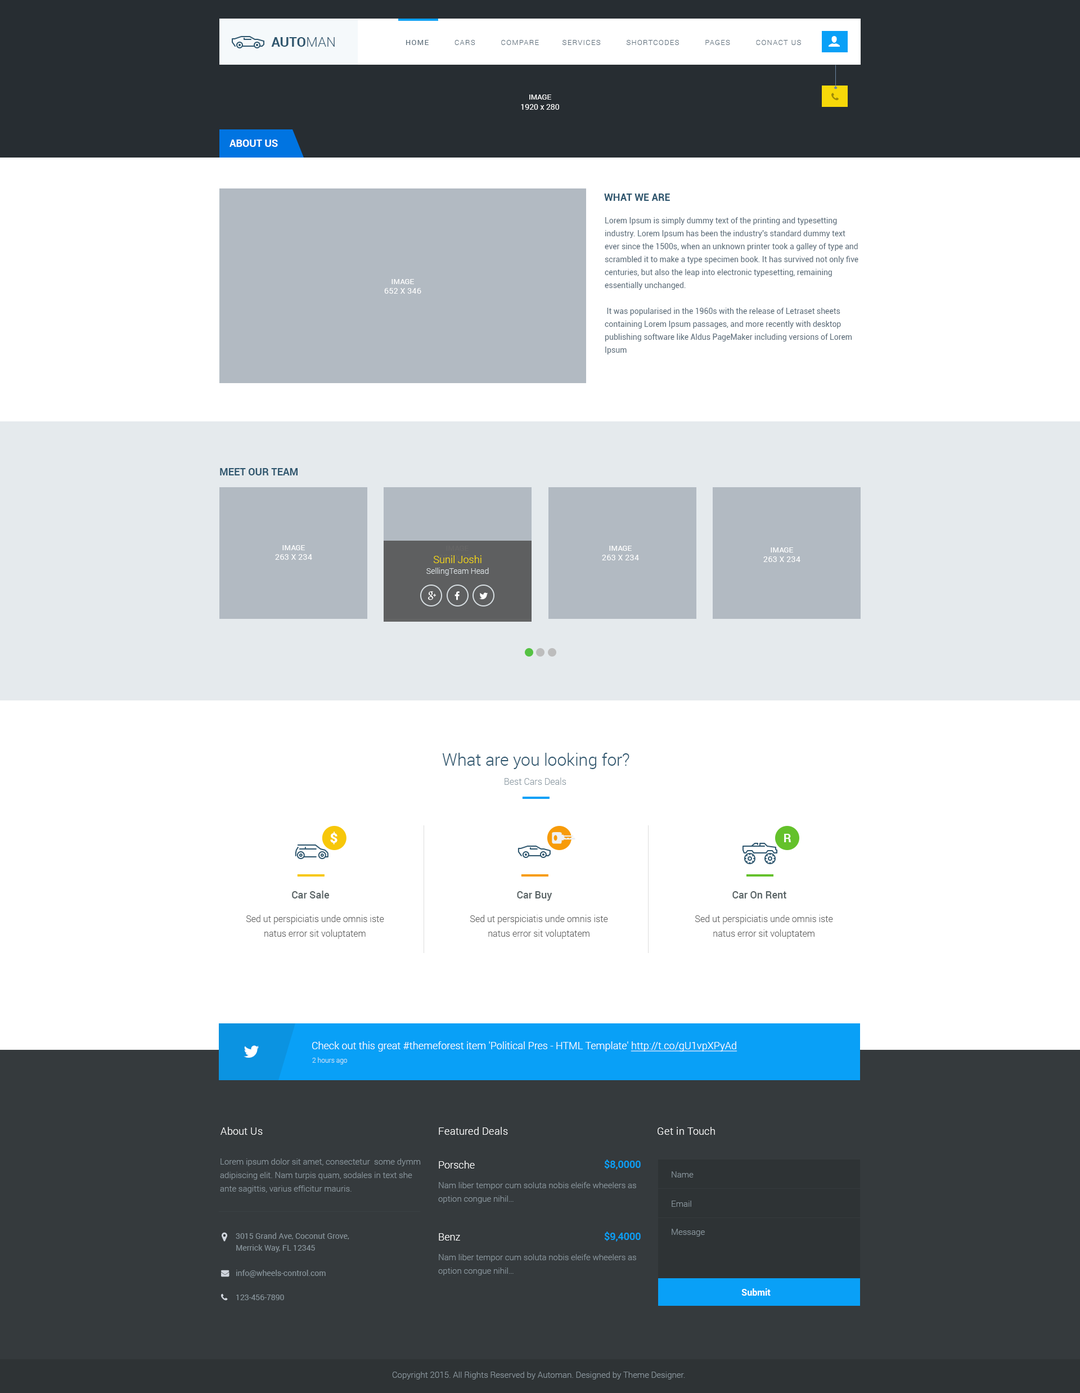
<style>
.page{position:relative;width:1080px;height:1393px;background:#ffffff}
.page>*{position:absolute;margin:0}
.t1{font:13.5px "Roboto-Bold";color:#2e566e;text-transform:uppercase}
.t2{font:13.5px "Roboto-Light";color:#2e566e;text-transform:uppercase}
.t3{font:7.3px "Roboto-Light";letter-spacing:0.1em;color:#5d6e7b;text-transform:uppercase}
.t4{font:7.3px "Roboto-Regular";letter-spacing:0.1em;color:#5d6e7b;text-transform:uppercase}
.t5{font:7.9px/10.1px "Roboto-Regular";color:#ffffff}
.t6{font:7.3px/10.1px "Roboto-Regular";color:#ffffff}
.t7{font:10.1px "Roboto-Bold";color:#ffffff;text-transform:uppercase}
.t8{font:10.1px "Roboto-Bold";color:#2e566e;text-transform:uppercase}
.t9{font:7.9px/12.9px "Roboto-Regular";color:#5d6e7b}
.t10{font:7.9px "Roboto-Regular";letter-spacing:0.025em;color:#ffffff}
.t11{font:7.3px/12.4px "Roboto-Regular";color:#ffffff}
.t12{font:7.9px/10.7px "Roboto-Light";color:#d9dfe2}
.t13{font:10.1px/10.7px "Roboto-Light";color:#f7d809}
.t14{font:16.9px "Roboto-Light";color:#2e566e}
.t15{font:9px "Roboto-Light";color:#8d9ba4}
.t16{font:13.5px "Roboto-Black";color:#ffffff}
.t17{font:11.8px "Roboto-Bold";color:#ffffff}
.t18{font:10.1px "Roboto-Medium";color:#5a6466}
.t19{font:9px/14.6px "Roboto-Light";color:#626262}
.t20{font:10.1px "Roboto-Light";color:#ffffff}
.t21{font:10.1px "Roboto-Light";color:#ffffff;text-decoration:underline}
.t22{font:6.8px "Roboto-Light";color:#c3e1f4}
.t23{font:10.1px "Roboto-Light";letter-spacing:0.025em;color:#ffffff}
.t24{font:8.4px/13.5px "Roboto-Light";color:#88949b}
.t25{font:10.1px "Roboto-Medium";color:#09a0f7}
.t26{font:8.4px "Roboto-Light";color:#88949b}
.t27{font:7.9px/11.8px "Roboto-Regular";color:#88949b}
.t28{font:7.9px "Roboto-Regular";color:#88949b}
.t29{font:9px "Roboto-Bold";color:#ffffff}
</style>
<div class="page">
<p class="t1" style="left:271px;top:37px;width:64px;height:10px">Auto<span class="t2">man</span></p>
<p class="t3" style="left:406px;top:40px;width:395px;height:5px"><span class="t4">Home</span>          Cars          COMPARE         Services          Shortcodes          Pages          Conact us</p>
<p class="t5" style="left:521px;top:94px;width:38px;height:16px;text-align:center"><span class="t6">IMAGE<br></span>1920 x 280</p>
<p class="t7" style="left:230px;top:140px;width:48px;height:7px">About Us</p>
<p class="t8" style="left:604px;top:194px;width:66px;height:7px">What We are</p>
<p class="t9" style="left:605px;top:217px;width:253px;height:137px">Lorem Ipsum is simply dummy text of the printing and typesetting industry. Lorem Ipsum has been the industry's standard dummy text ever since the 1500s, when an unknown printer took a galley of type and scrambled it to make a type specimen book. It has survived not only five centuries, but also the leap into electronic typesetting, remaining essentially unchanged.<br><br> It was popularised in the 1960s with the release of Letraset sheets containing Lorem Ipsum passages, and more recently with desktop publishing software like Aldus PageMaker including versions of Lorem Ipsum</p>
<p class="t10" style="left:384px;top:279px;width:37px;height:15px;text-align:center"><span class="t11">IMAGE<br></span>652 X 346</p>
<p class="t8" style="left:220px;top:468px;width:78px;height:7px">Meet Our team</p>
<p class="t10" style="left:275px;top:545px;width:37px;height:15px;text-align:center"><span class="t11">IMAGE<br></span>263 X 234</p>
<p class="t10" style="left:602px;top:546px;width:37px;height:14px;text-align:center"><span class="t11">IMAGE<br></span>263 X 234</p>
<p class="t12" style="left:426px;top:555px;width:63px;height:20px;text-align:center"><span class="t13">Sunil Joshi<br></span>SellingTeam Head</p>
<p class="t10" style="left:763px;top:547px;width:37px;height:15px;text-align:center"><span class="t11">IMAGE<br></span>263 X 234</p>
<p class="t14" style="left:442px;top:753px;width:187px;height:16px">What are you looking for?</p>
<p class="t15" style="left:505px;top:777px;width:61px;height:8px">Best Cars Deals</p>
<p class="t16" style="left:330px;top:831px;width:8px;height:13px">$</p>
<p class="t17" style="left:784px;top:834px;width:7px;height:8px">R</p>
<p class="t18" style="left:292px;top:890px;width:38px;height:8px">Car Sale</p>
<p class="t18" style="left:517px;top:891px;width:35px;height:10px">Car Buy</p>
<p class="t18" style="left:732px;top:891px;width:54px;height:7px">Car On Rent</p>
<p class="t19" style="left:246px;top:915px;width:138px;height:24px;text-align:center">Sed ut perspiciatis unde omnis iste natus error sit voluptatem</p>
<p class="t19" style="left:470px;top:915px;width:138px;height:24px;text-align:center">Sed ut perspiciatis unde omnis iste natus error sit voluptatem</p>
<p class="t19" style="left:695px;top:915px;width:138px;height:24px;text-align:center">Sed ut perspiciatis unde omnis iste natus error sit voluptatem</p>
<p class="t20" style="left:312px;top:1041px;width:425px;height:10px">Check out this great #themeforest item 'Political Pres - HTML Template' <span class="t21">http://t.co/gU1vpXPyAd</span></p>
<p class="t22" style="left:312px;top:1057px;width:35px;height:7px">2 hours ago</p>
<p class="t23" style="left:220px;top:1127px;width:43px;height:8px">About Us</p>
<p class="t23" style="left:439px;top:1127px;width:69px;height:8px">Featured Deals</p>
<p class="t23" style="left:658px;top:1127px;width:57px;height:8px">Get in Touch</p>
<p class="t24" style="left:220px;top:1158px;width:201px;height:35px">Lorem ipsum dolor sit amet, consectetur  some dymm<br>adipiscing elit. Nam turpis quam, sodales in text she<br>ante sagittis, varius efficitur mauris.</p>
<p class="t20" style="left:439px;top:1160px;width:36px;height:8px">Porsche</p>
<p class="t25" style="left:604px;top:1159px;width:37px;height:10px">$8,0000</p>
<p class="t24" style="left:438px;top:1182px;width:198px;height:21px">Nam liber tempor cum soluta nobis eleife wheelers as<br>option congue nihil…</p>
<p class="t26" style="left:672px;top:1171px;width:22px;height:6px">Name</p>
<p class="t26" style="left:672px;top:1200px;width:19px;height:7px">Email</p>
<p class="t26" style="left:672px;top:1228px;width:33px;height:8px">Message</p>
<p class="t27" style="left:236px;top:1232px;width:113px;height:20px">3015 Grand Ave, Coconut Grove,<br>Merrick Way, FL 12345</p>
<p class="t20" style="left:439px;top:1233px;width:21px;height:7px">Benz</p>
<p class="t25" style="left:604px;top:1231px;width:37px;height:10px">$9,4000</p>
<p class="t24" style="left:438px;top:1254px;width:198px;height:21px">Nam liber tempor cum soluta nobis eleife wheelers as<br>option congue nihil…</p>
<p class="t28" style="left:236px;top:1270px;width:90px;height:7px">info@wheels-control.com</p>
<p class="t29" style="left:741px;top:1288px;width:30px;height:7px">Submit</p>
<p class="t28" style="left:236px;top:1294px;width:48px;height:6px">123-456-7890</p>
<p class="t26" style="left:392px;top:1371px;width:293px;height:8px">Copyright 2015. All Rights Reserved by Automan. Designed by Theme Designer.</p>
</div>
